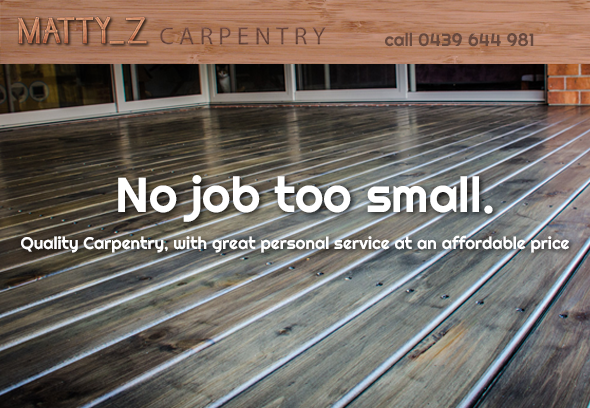
<style>
.page{position:relative;width:590px;height:408px}
.page>*{position:absolute;margin:0}
.t1{font:18px "Righteous-Regular";color:#67493e}
.t2{font:49px "Righteous-Regular";color:#ffffff}
.t3{font:17px "Righteous-Regular";color:#ffffff}
</style>
<div class="page">
<p class="t1" style="left:385px;top:32px;width:149px;height:15px">call 0439 644 981</p>
<p class="t2" style="left:118px;top:175px;width:375px;height:47px">No job too small.</p>
<p class="t3" style="left:21px;top:235px;width:548px;height:18px">Quality Carpentry, with great personal service at an affordable price</p>
</div>
